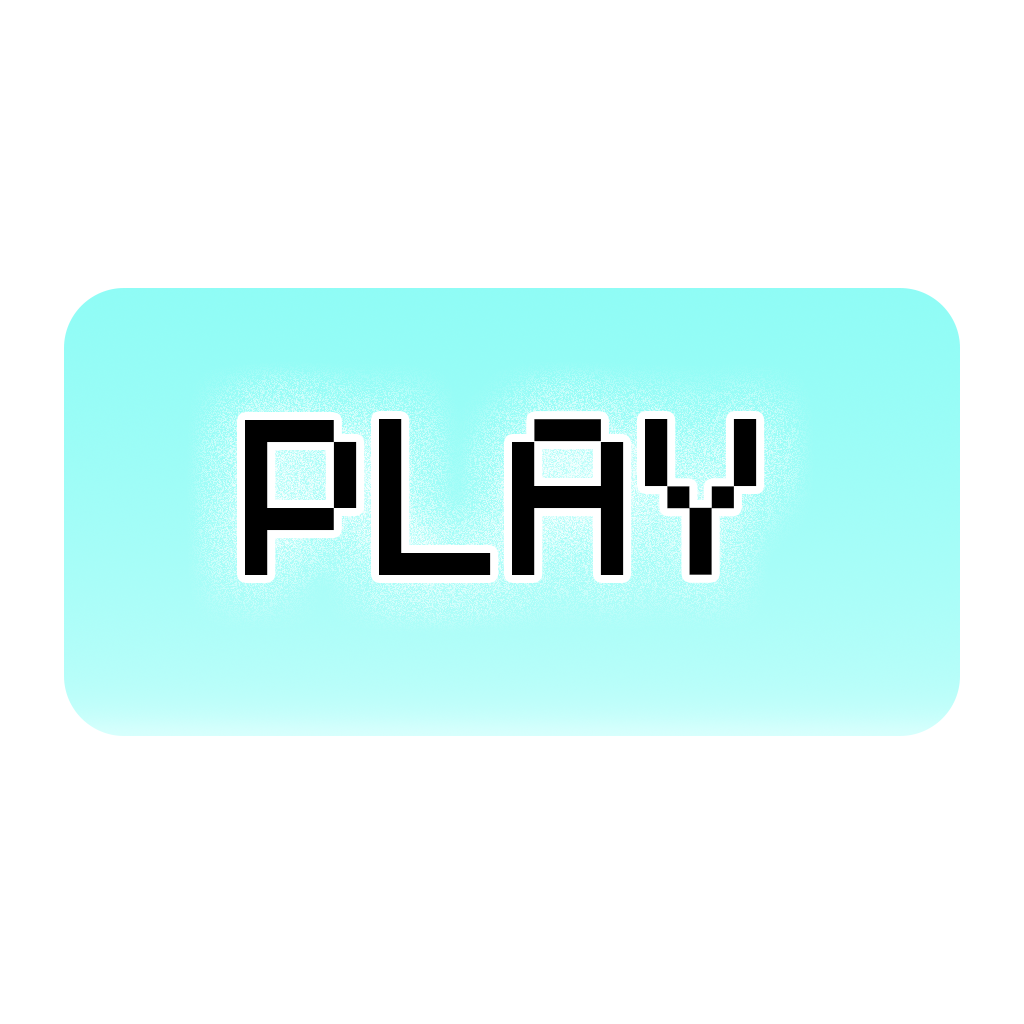
<style>
.page{position:relative;width:1024px;height:1024px;background:#ffffff}
.page>*{position:absolute;margin:0}
.t1{font:200px "VolterGoldfish";color:#000000}
</style>
<div class="page">
<p class="t1" style="left:245px;top:419px;width:512px;height:156px">PLAY</p>
</div>
